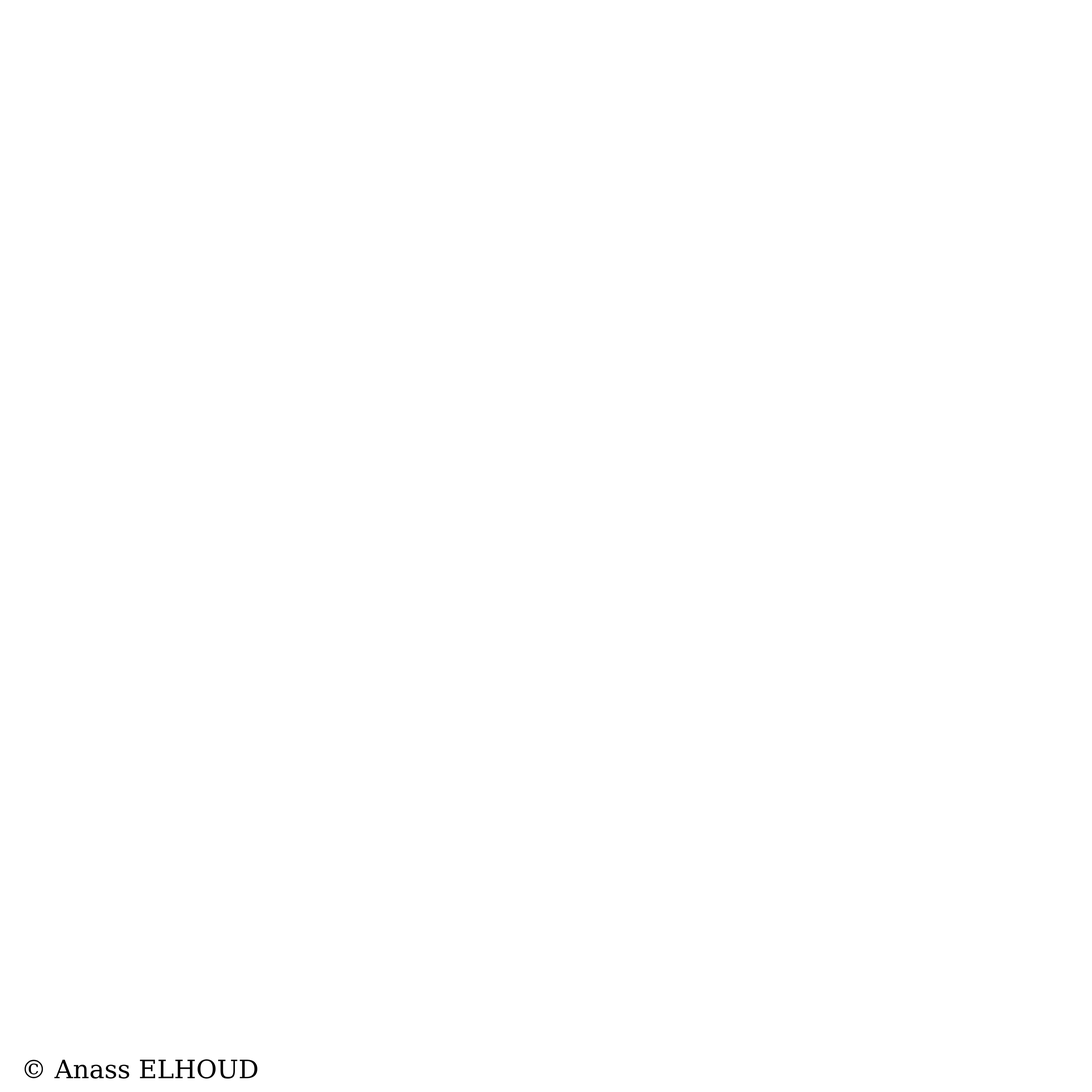
<style>
.page{position:relative;width:1092px;height:1092px;background:#ffffff}
.page>*{position:absolute;margin:0}
.t1{font:25.4px "DejaVuSerif";color:#000000}
</style>
<div class="page">
<p class="t1" style="left:24px;top:1059px;width:233px;height:20px">© Anass ELHOUD</p>
</div>
